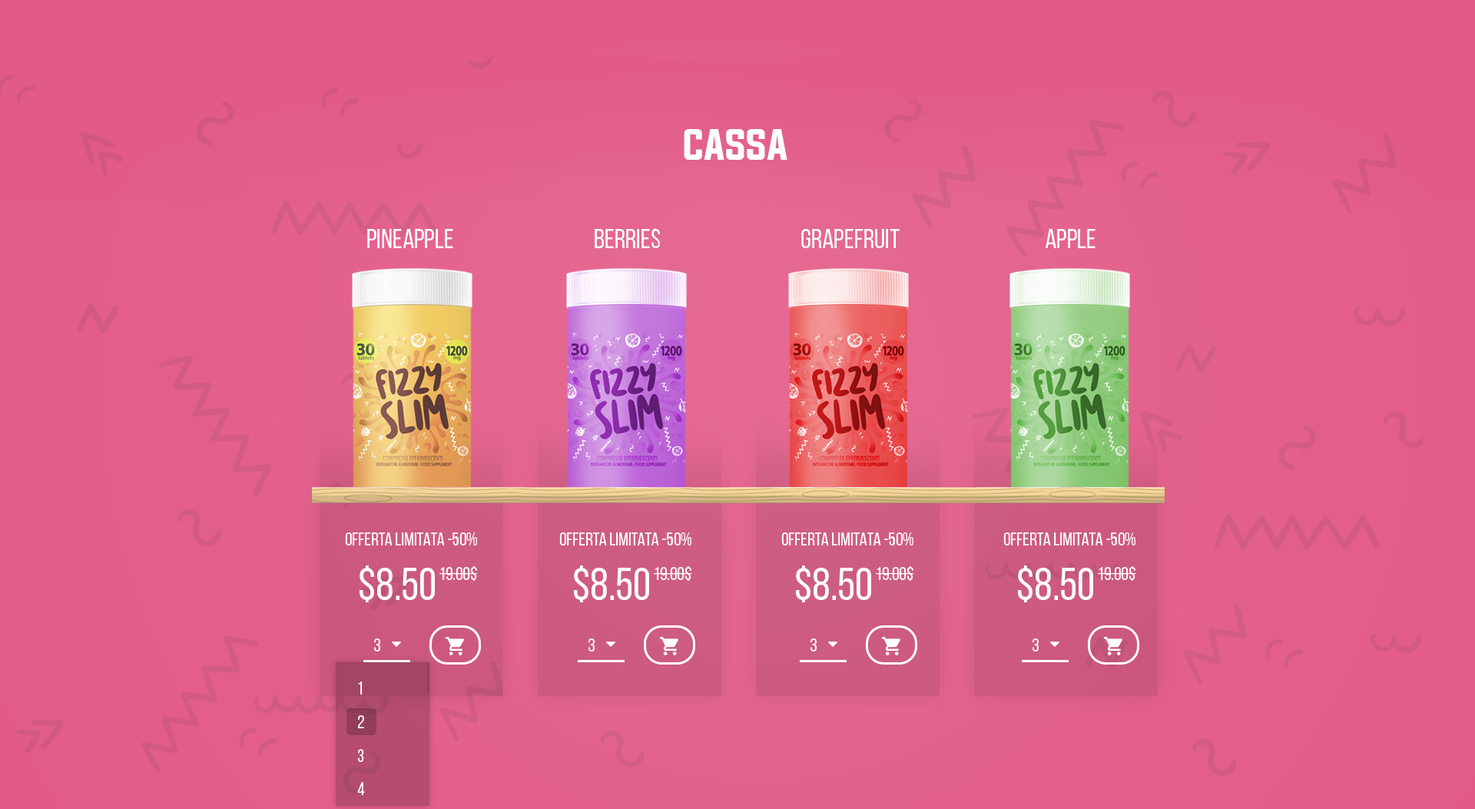
<style>
.page{position:relative;width:1475px;height:809px}
.page>*{position:absolute;margin:0}
.t1{font:36.9px "Evogria";color:#ffffff;text-transform:uppercase}
.t2{font:27.6px "BebasNeueRegular";color:#ffffff;text-transform:uppercase}
.t3{font:18.4px "BebasNeueRegular";color:#ffffff;text-transform:uppercase}
.t4{font:46.1px "BebasNeueRegular";color:#ffffff;text-transform:uppercase}
</style>
<div class="page">
<p class="t1" style="left:684px;top:129px;width:103px;height:31px">CASSA</p>
<p class="t2" style="left:367px;top:229px;width:86px;height:19px">PINEAPPLE</p>
<p class="t2" style="left:594px;top:228px;width:66px;height:20px">berries</p>
<p class="t2" style="left:801px;top:229px;width:98px;height:19px">grapefruit</p>
<p class="t2" style="left:1045px;top:229px;width:50px;height:19px">APPLE</p>
<p class="t3" style="left:345px;top:532px;width:132px;height:13px">OFFERTA LIMITATA -50%</p>
<p class="t3" style="left:559px;top:532px;width:132px;height:13px">OFFERTA LIMITATA -50%</p>
<p class="t3" style="left:781px;top:532px;width:132px;height:13px">OFFERTA LIMITATA -50%</p>
<p class="t3" style="left:1003px;top:532px;width:132px;height:13px">OFFERTA LIMITATA -50%</p>
<p class="t4" style="left:359px;top:565px;width:76px;height:37px">$8.50</p>
<p class="t3" style="left:439px;top:565px;width:39px;height:16px">19.00$</p>
<p class="t4" style="left:574px;top:565px;width:75px;height:37px">$8.50</p>
<p class="t3" style="left:654px;top:565px;width:38px;height:16px">19.00$</p>
<p class="t4" style="left:796px;top:565px;width:75px;height:37px">$8.50</p>
<p class="t3" style="left:876px;top:565px;width:38px;height:16px">19.00$</p>
<p class="t4" style="left:1018px;top:565px;width:75px;height:37px">$8.50</p>
<p class="t3" style="left:1097px;top:565px;width:39px;height:16px">19.00$</p>
<p class="t3" style="left:374px;top:638px;width:6px;height:13px">3</p>
<p class="t3" style="left:588px;top:638px;width:6px;height:13px">3</p>
<p class="t3" style="left:810px;top:638px;width:6px;height:13px">3</p>
<p class="t3" style="left:1032px;top:638px;width:6px;height:13px">3</p>
<p class="t3" style="left:357px;top:681px;width:8px;height:114px;text-align:right">1<br>2<br>3<br>4</p>
</div>
